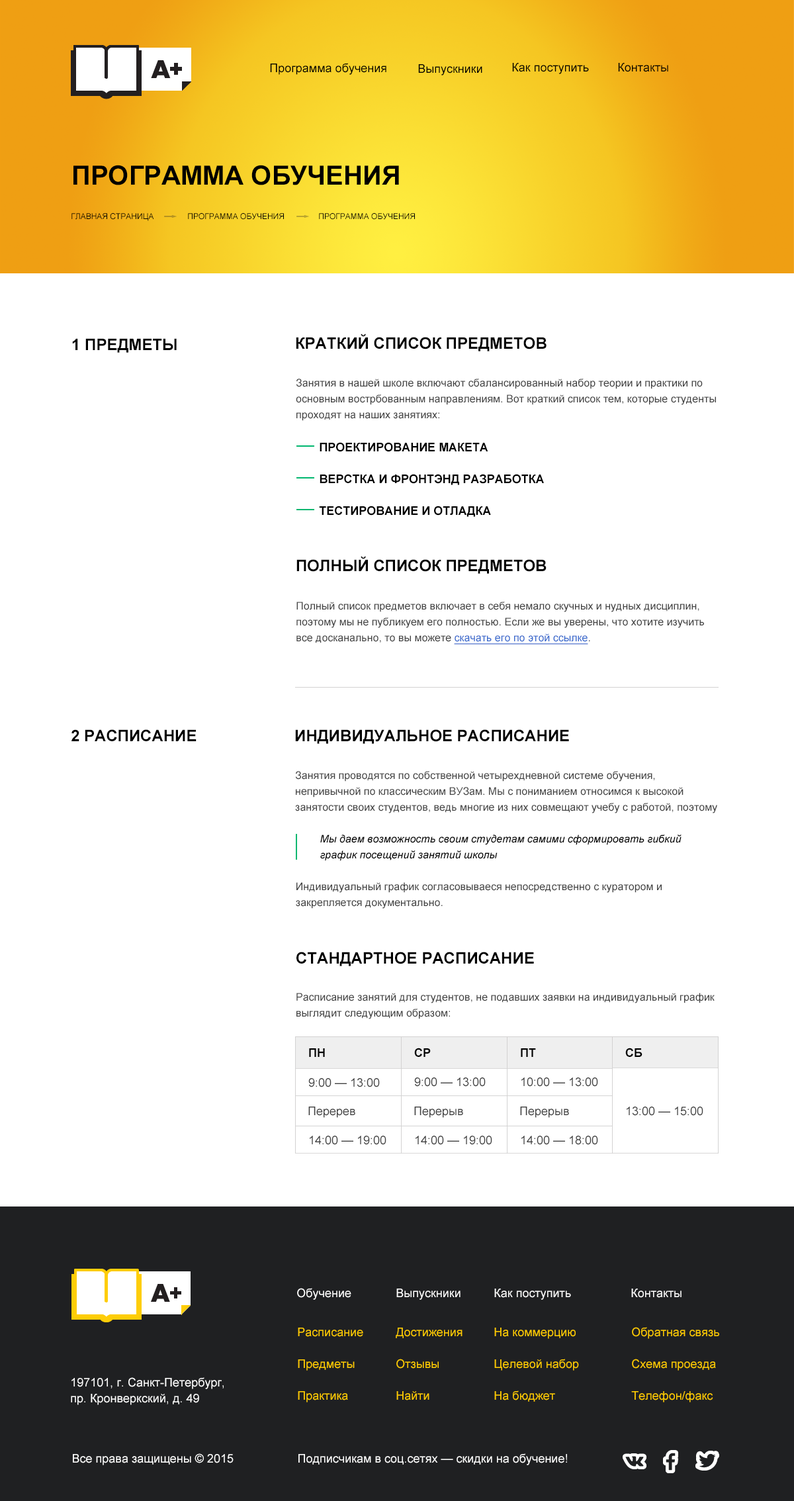
<style>
.page{position:relative;width:794px;height:1501px;background:#ffffff}
.page>*{position:absolute;margin:0}
.t1{font:11.9px "ArialMT";color:#000000}
.t2{font:26.5px "Arial-BoldMT";color:#000000;text-transform:uppercase}
.t3{font:7.9px "ArialMT";color:#000000;text-transform:uppercase}
.t4{font:15.9px "Arial-BoldMT";color:#000000;text-transform:uppercase}
.t5{font:10.6px/15.9px "ArialMT";color:#404040}
.t6{font:11.9px "Arial-BoldMT";color:#000000;text-transform:uppercase}
.t7{font:10.6px/15.9px "ArialMT";color:#3366cc;text-decoration:underline}
.t8{font:10.6px/15.9px "Arial-ItalicMT";color:#000000}
.t9{font:11.9px "Arial-BoldMT";color:#000000}
.t10{font:11.9px "ArialMT";color:#404040}
.t11{font:11.9px "ArialMT";color:#ffffff}
.t12{font:11.9px/15.9px "ArialMT";color:#ffcc00}
.t13{font:11.9px/15.9px "ArialMT";color:#ffffff}
</style>
<div class="page">
<p class="t1" style="left:270px;top:63px;width:117px;height:12px">Программа обучения</p>
<p class="t1" style="left:418px;top:64px;width:65px;height:11px">Выпускники</p>
<p class="t1" style="left:512px;top:63px;width:77px;height:11px">Как поступить</p>
<p class="t1" style="left:618px;top:63px;width:51px;height:9px">Контакты</p>
<p class="t2" style="left:73px;top:165px;width:326px;height:20px">ПРОГРАММА ОБУЧЕНИЯ</p>
<p class="t3" style="left:71px;top:213px;width:83px;height:8px">Главная страница</p>
<p class="t3" style="left:188px;top:213px;width:96px;height:7px">Программа обучения</p>
<p class="t3" style="left:319px;top:213px;width:96px;height:7px">Программа обучения</p>
<p class="t4" style="left:72px;top:338px;width:105px;height:15px">1 предметы</p>
<p class="t4" style="left:296px;top:334px;width:251px;height:17px">Краткий список предметов</p>
<p class="t5" style="left:296px;top:379px;width:420px;height:42px">Занятия в нашей школе включают сбалансированный набор теории и практики по <br>основным вострбованным направлениям. Вот краткий список тем, которые студенты <br>проходят на наших занятиях:</p>
<p class="t6" style="left:320px;top:442px;width:168px;height:10px">Проектирование макета</p>
<p class="t6" style="left:320px;top:474px;width:224px;height:11px">Верстка и фронтэнд разработка</p>
<p class="t6" style="left:319px;top:506px;width:172px;height:11px">тестирование и отладка</p>
<p class="t4" style="left:297px;top:556px;width:250px;height:18px">полный список предметов</p>
<p class="t5" style="left:297px;top:602px;width:407px;height:43px">Полный список предметов включает в себя немало скучных и нудных дисциплин, <br>поэтому мы не публикуем его полностью. Если же вы уверены, что хотите изучить <br>все досканально, то вы можете <span class="t7">скачать его по этой ссылке</span>.</p>
<p class="t4" style="left:71px;top:729px;width:126px;height:12px">2 Расписание</p>
<p class="t4" style="left:295px;top:729px;width:274px;height:15px">Индивидуальное Расписание</p>
<p class="t5" style="left:295px;top:771px;width:423px;height:42px">Занятия проводятся по собственной четырехдневной системе обучения,<br>непривычной по классическим ВУЗам. Мы с пониманием относимся к высокой <br>занятости своих студентов, ведь многие из них совмещают учебу с работой, поэтому</p>
<p class="t8" style="left:320px;top:835px;width:362px;height:26px">Мы даем возможность своим студетам самими сформировать гибкий  <br>график посещений занятий школы</p>
<p class="t5" style="left:296px;top:882px;width:366px;height:27px">Индивидуальный график согласовываеся непосредственно с куратором и <br>закрепляется документально.</p>
<p class="t4" style="left:297px;top:952px;width:237px;height:14px">Стандартное расписание</p>
<p class="t5" style="left:297px;top:993px;width:418px;height:26px">Расписание занятий для студентов, не подавших заявки на индивидуальный график <br>выглядит следующим образом:</p>
<p class="t9" style="left:309px;top:1048px;width:16px;height:9px">ПН</p>
<p class="t9" style="left:414px;top:1048px;width:17px;height:9px">СР</p>
<p class="t9" style="left:521px;top:1048px;width:15px;height:9px">ПТ</p>
<p class="t9" style="left:626px;top:1048px;width:17px;height:9px">СБ</p>
<p class="t10" style="left:308px;top:1078px;width:72px;height:10px">9:00 — 13:00</p>
<p class="t10" style="left:414px;top:1078px;width:72px;height:9px">9:00 — 13:00</p>
<p class="t10" style="left:522px;top:1078px;width:76px;height:9px">10:00 — 13:00</p>
<p class="t10" style="left:308px;top:1107px;width:47px;height:11px">Перерев</p>
<p class="t10" style="left:414px;top:1107px;width:49px;height:11px">Перерыв</p>
<p class="t10" style="left:520px;top:1107px;width:49px;height:11px">Перерыв</p>
<p class="t10" style="left:627px;top:1107px;width:77px;height:9px">13:00 — 15:00</p>
<p class="t10" style="left:310px;top:1136px;width:77px;height:9px">14:00 — 19:00</p>
<p class="t10" style="left:416px;top:1136px;width:76px;height:9px">14:00 — 19:00</p>
<p class="t10" style="left:522px;top:1136px;width:76px;height:9px">14:00 — 18:00</p>
<p class="t11" style="left:297px;top:1288px;width:54px;height:12px">Обучение</p>
<p class="t11" style="left:396px;top:1289px;width:65px;height:11px">Выпускники</p>
<p class="t11" style="left:494px;top:1289px;width:77px;height:11px">Как поступить</p>
<p class="t11" style="left:631px;top:1289px;width:51px;height:9px">Контакты</p>
<p class="t12" style="left:298px;top:1328px;width:65px;height:75px">Расписание<br><br>Предметы<br><br>Практика</p>
<p class="t12" style="left:396px;top:1328px;width:67px;height:73px">Достижения<br><br>Отзывы<br><br>Найти</p>
<p class="t12" style="left:494px;top:1328px;width:85px;height:74px">На коммерцию<br><br>Целевой набор<br><br>На бюджет</p>
<p class="t12" style="left:631px;top:1327px;width:89px;height:76px">Обратная связь<br><br>Схема проезда<br><br>Телефон/факс</p>
<p class="t13" style="left:71px;top:1377px;width:153px;height:28px">197101, г. Санкт-Петербург, <br>пр. Кронверкский, д. 49</p>
<p class="t11" style="left:73px;top:1454px;width:161px;height:11px">Все права защищены © 2015</p>
<p class="t11" style="left:299px;top:1454px;width:268px;height:11px">Подписчикам в соц.сетях — скидки на обучение!</p>
</div>
